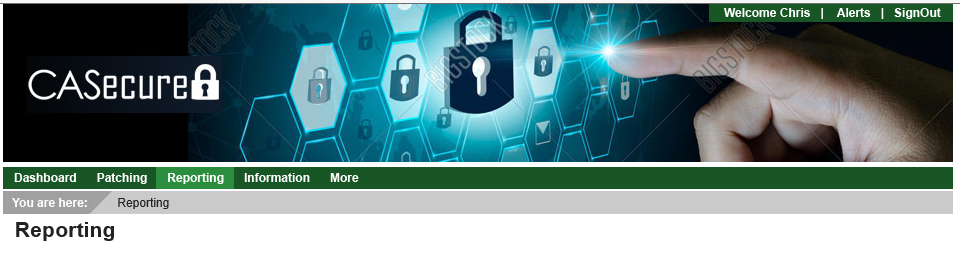
<style>
.page{position:relative;width:960px;height:255px}
.page>*{position:absolute;margin:0}
.t1{font:12px "Arial-BoldMT";color:#ffffff}
</style>
<div class="page">
<p class="t1" style="left:724px;top:8px;width:217px;height:11px">Welcome Chris   |    Alerts   |   SignOut</p>
<p class="t1" style="left:14px;top:173px;width:345px;height:11px">Dashboard      Patching      Reporting      Information      More</p>
</div>
